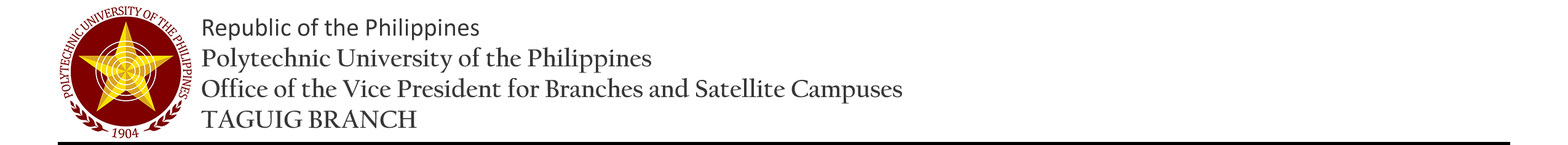
<style>
.page{position:relative;width:1568px;height:145px;background:#ffffff}
.page>*{position:absolute;margin:0}
.t1{font:25.6px "CalifornianFB-Bold";color:#363636}
.t2{font:25.6px "Calibri";color:#363636}
</style>
<div class="page">
<p class="t1" style="left:201px;top:18px;width:701px;height:111px"><span class="t2">Republic of the Philippines<br></span>Polytechnic University of the Philippines<br>Office of the Vice President for Branches and Satellite Campuses<br>TAGUIG BRANCH</p>
</div>
